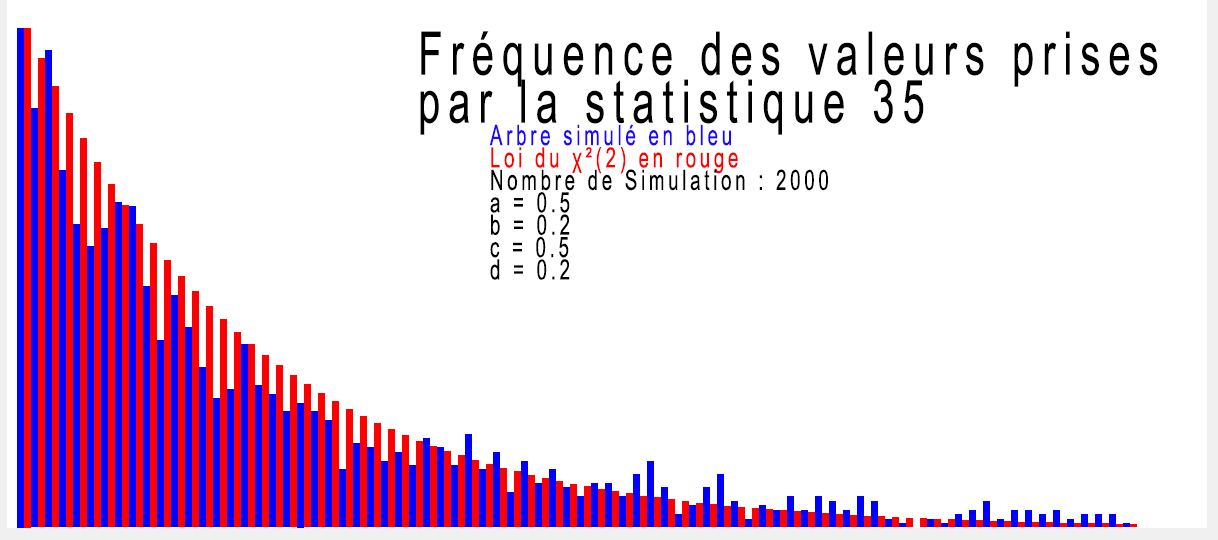
<style>
.page{position:relative;width:1218px;height:540px;background:#ffffff}
.page>*{position:absolute;margin:0}
.t1{font:28px "ArialMT";letter-spacing:0.2em;color:#000000;scale:0.67 1}
.t2{font:60px "ArialMT";letter-spacing:0.2em;color:#010000;scale:0.67 1}
.t3{font:28px "ArialMT";letter-spacing:0.2em;color:#1e07fd;scale:0.67 1}
.t4{font:28px "ArialMT";letter-spacing:0.2em;color:#fc0000;scale:0.67 1}
</style>
<div class="page">
<p class="t1" style="left:420px;top:31px;width:738px;height:249px"><span class="t2">Fréquence des valeurs prises par la statistique 35<br>  </span><span class="t3">Arbre simulé en bleu<br>  </span><span class="t4">Loi du χ²(2) en rouge<br>  </span>Nombre de Simulation : 2000<br>  a = 0.5<br>  b = 0.2<br>  c = 0.5<br>  d = 0.2</p>
</div>
